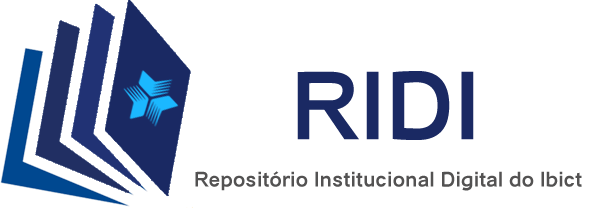
<style>
.page{position:relative;width:590px;height:210px;background:#ffffff}
.page>*{position:absolute;margin:0}
.t1{font:94.6px "Catriel-Bold";color:#1a2963}
.t2{font:20.4px "Catriel-Bold";color:#535252}
</style>
<div class="page">
<p class="t1" style="left:297px;top:71px;width:177px;height:69px">RIDI</p>
<p class="t2" style="left:195px;top:171px;width:387px;height:20px">Repositório Institucional Digital do Ibict</p>
</div>
